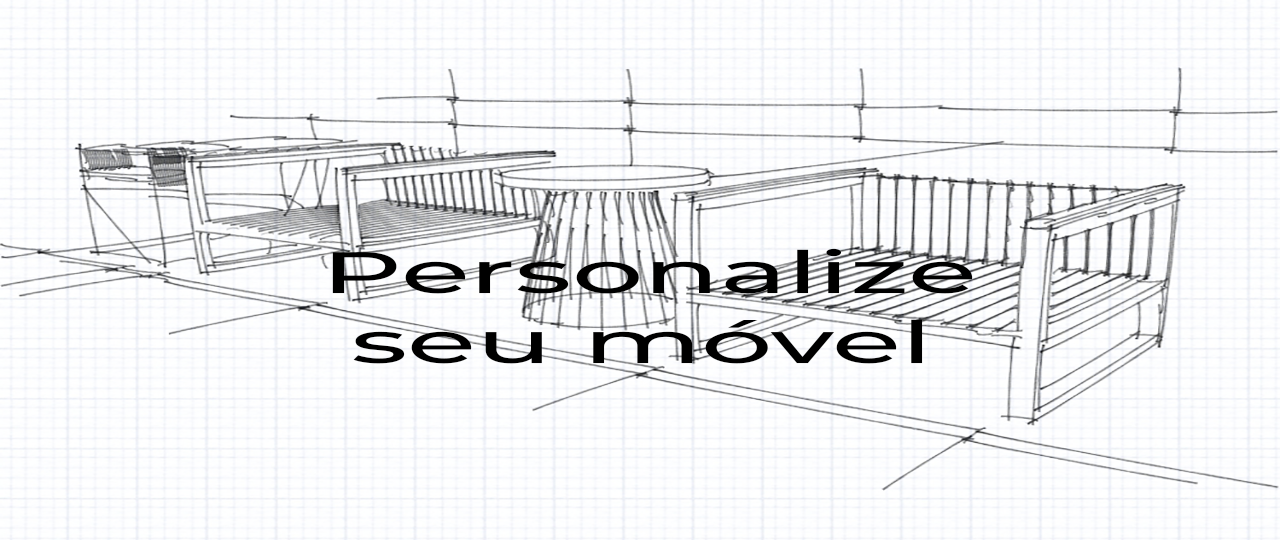
<style>
.page{position:relative;width:1280px;height:540px}
.page>*{position:absolute;margin:0}
.t1{font:58.3px "MontserratRoman-Medium";color:#000000;scale:1.93 1}
</style>
<div class="page">
<p class="t1" style="left:332px;top:248px;width:641px;height:116px">Personalize<br> seu móvel</p>
</div>
